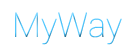
<style>
.page{position:relative;width:140px;height:52px;background:#ffffff}
.page>*{position:absolute;margin:0}
.t1{font:34px "Roboto-Thin";color:#49c5ff}
</style>
<div class="page">
<p class="t1" style="left:15px;top:12px;width:107px;height:33px">MyWay</p>
</div>
